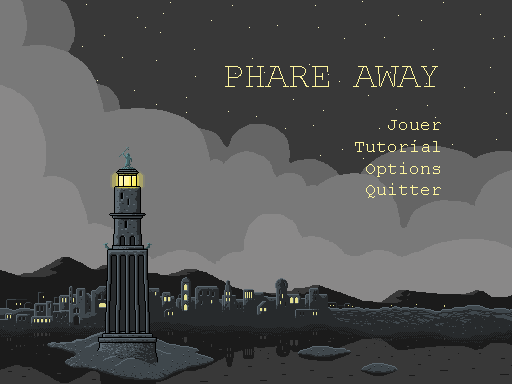
<style>
.page{position:relative;width:512px;height:384px;background:#383838}
.page>*{position:absolute;margin:0}
.t1{font:18px "CourierNewPSMT";color:#fef59d}
.t2{font:36px "CourierNewPSMT";color:#fef59d}
</style>
<div class="page">
<p class="t1" style="left:225px;top:66px;width:216px;height:132px;text-align:right"><span class="t2">PHARE AWAY<br></span><br>Jouer<br>Tutorial<br>Options<br>Quitter</p>
</div>
